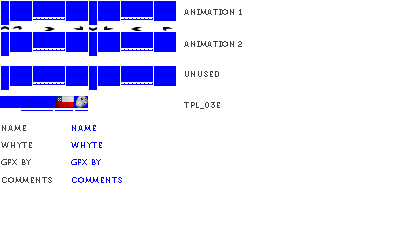
<style>
.page{position:relative;width:400px;height:230px;background:#ffffff}
.page>*{position:absolute;margin:0}
.t1{font:8px "Museo700-Regular";letter-spacing:0.075em;color:#404040;text-transform:uppercase}
.t2{font:8px "Museo700-Regular";letter-spacing:0.075em;color:#0000ff;text-transform:uppercase}
</style>
<div class="page">
<p class="t1" style="left:184px;top:9px;width:58px;height:6px">Animation 1</p>
<p class="t1" style="left:184px;top:41px;width:58px;height:6px">Animation 2</p>
<p class="t1" style="left:185px;top:71px;width:34px;height:6px">unused</p>
<p class="t1" style="left:184px;top:102px;width:36px;height:7px">tpl_03e</p>
<p class="t1" style="left:2px;top:125px;width:24px;height:6px">name</p>
<p class="t2" style="left:72px;top:125px;width:24px;height:6px">name</p>
<p class="t1" style="left:1px;top:142px;width:31px;height:6px">whyte</p>
<p class="t2" style="left:71px;top:142px;width:31px;height:6px">whyte</p>
<p class="t1" style="left:1px;top:159px;width:30px;height:6px">gfx by</p>
<p class="t2" style="left:71px;top:159px;width:30px;height:6px">gfx by</p>
<p class="t1" style="left:2px;top:177px;width:50px;height:6px">comments</p>
<p class="t2" style="left:72px;top:177px;width:50px;height:6px">comments</p>
</div>
